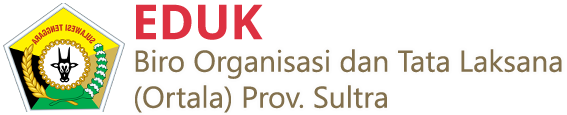
<style>
.page{position:relative;width:567px;height:115px;background:#ffffff}
.page>*{position:absolute;margin:0}
.t1{font:48px "OpenSans-Bold";color:#dd3141}
.t2{font:30px "SegoeUISymbol";color:#82704d}
</style>
<div class="page">
<p class="t1" style="left:136px;top:4px;width:127px;height:36px">EDUK</p>
<p class="t2" style="left:135px;top:49px;width:427px;height:64px">Biro Organisasi dan Tata Laksana <br>(Ortala) Prov. Sultra</p>
</div>
